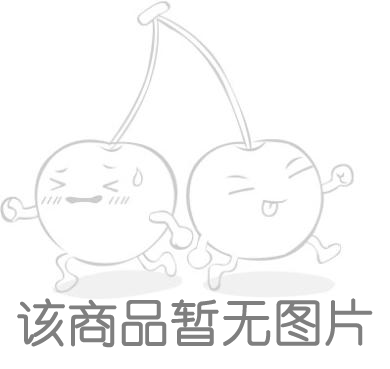
<style>
.page{position:relative;width:390px;height:369px;background:#ffffff}
.page>*{position:absolute;margin:0}
.t1{font:50px "YouYuan";color:#7f7f7f;font-weight:bold}
</style>
<div class="page">
<p class="t1" style="left:17px;top:298px;width:356px;height:50px">该商品暂无图片</p>
</div>
